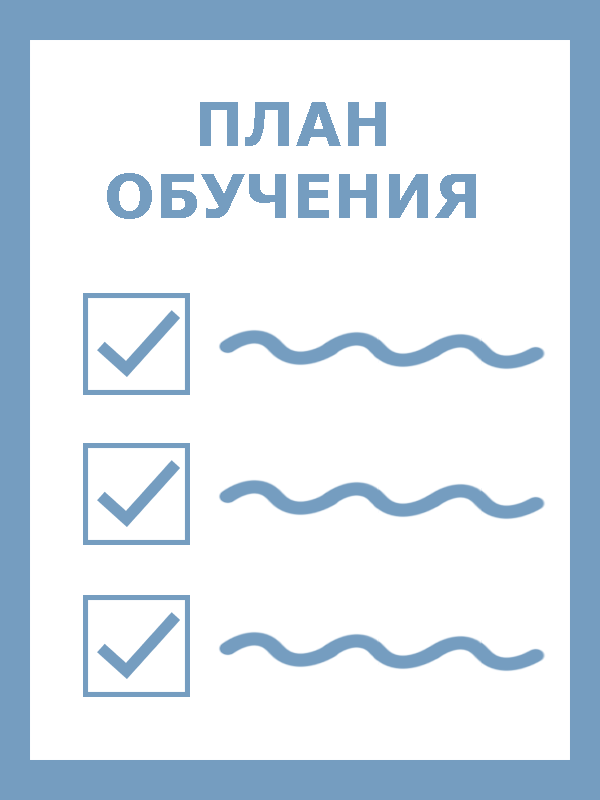
<style>
.page{position:relative;width:600px;height:800px;background:#ffffff}
.page>*{position:absolute;margin:0}
.t1{font:60px "Verdana-Bold";color:#759dc0}
</style>
<div class="page">
<p class="t1" style="left:107px;top:102px;width:369px;height:117px;text-align:center">ПЛАН<br>ОБУЧЕНИЯ</p>
</div>
